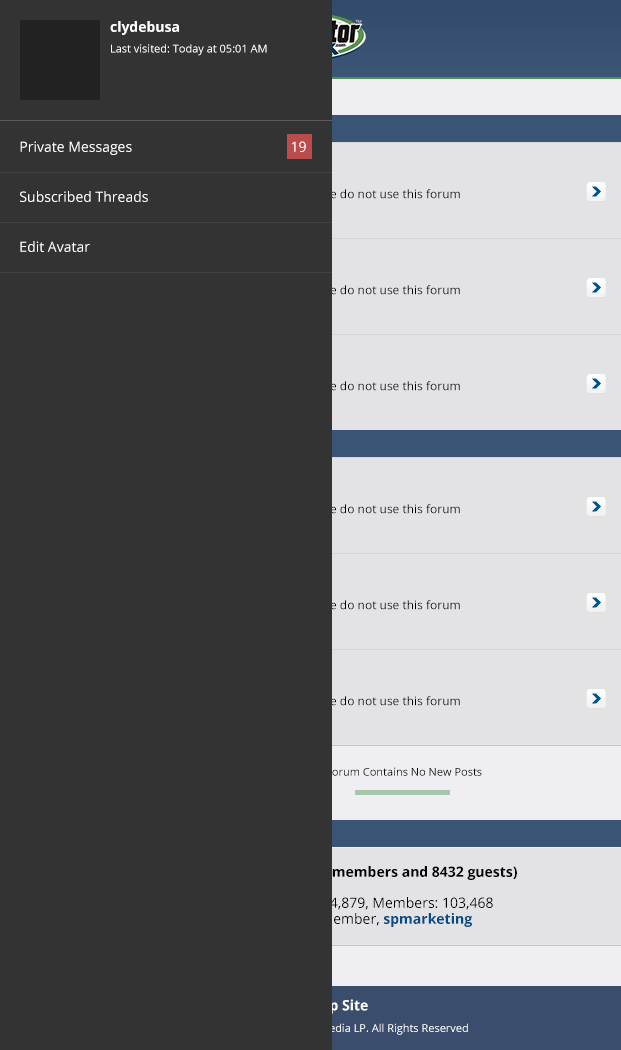
<style>
.page{position:relative;width:621px;height:1050px;background:#333333}
.page>*{position:absolute;margin:0}
.t1{font:14px "OpenSans-Bold";color:#ffffff}
.t2{font:11px "OpenSans";color:#ffffff}
.t3{font:14px "OpenSans";color:#ffffff}
.t4{font:11px "OpenSans";color:#000000}
.t5{font:14px "OpenSans-Bold"}
.t6{font:14px "OpenSans-Bold";color:#333333}
.t7{font:11px "OpenSans";color:#333333}
</style>
<div class="page">
<p class="t1" style="left:110px;top:21px;width:69px;height:14px">clydebusa</p>
<p class="t2" style="left:111px;top:44px;width:156px;height:12px">Last visited: Today at 05:01 AM</p>
<p class="t3" style="left:20px;top:141px;width:112px;height:14px">Private Messages</p>
<p class="t3" style="left:292px;top:141px;width:14px;height:11px">19</p>
<p class="t3" style="left:20px;top:191px;width:128px;height:11px">Subscribed Threads</p>
<p class="t3" style="left:20px;top:241px;width:70px;height:11px">Edit Avatar</p>
<p class="t4" style="left:327px;top:767px;width:155px;height:9px">Forum Contains No New Posts</p>
<p class="t5" style="left:100px;top:866px;width:417px;height:14px">Currently Active Users: 8711 (279 members and 8432 guests)</p>
<p class="t6" style="left:252px;top:999px;width:116px;height:15px">Full Desktop Site</p>
<p class="t7" style="left:153px;top:1023px;width:315px;height:12px">Copyright © 2003-2014 Escalate Media LP. All Rights Reserved</p>
</div>
